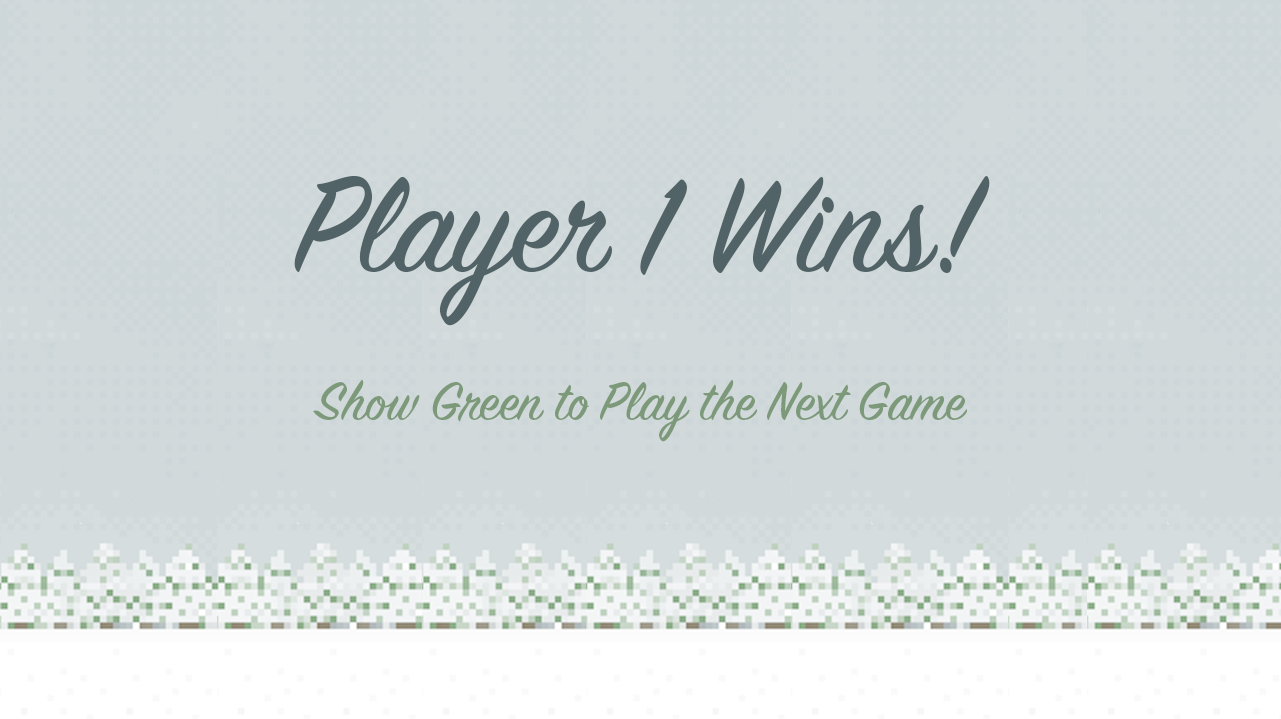
<style>
.page{position:relative;width:1281px;height:719px;background:#d1d9db}
.page>*{position:absolute;margin:0}
.t1{font:150px "SignPainter-HouseScript";color:#516366}
.t2{font:60px "SignPainter-HouseScript";color:#7c997a}
</style>
<div class="page">
<p class="t1" style="left:294px;top:175px;width:696px;height:151px">Player 1 Wins!</p>
<p class="t2" style="left:313px;top:379px;width:654px;height:63px">Show Green to Play the Next Game</p>
</div>
